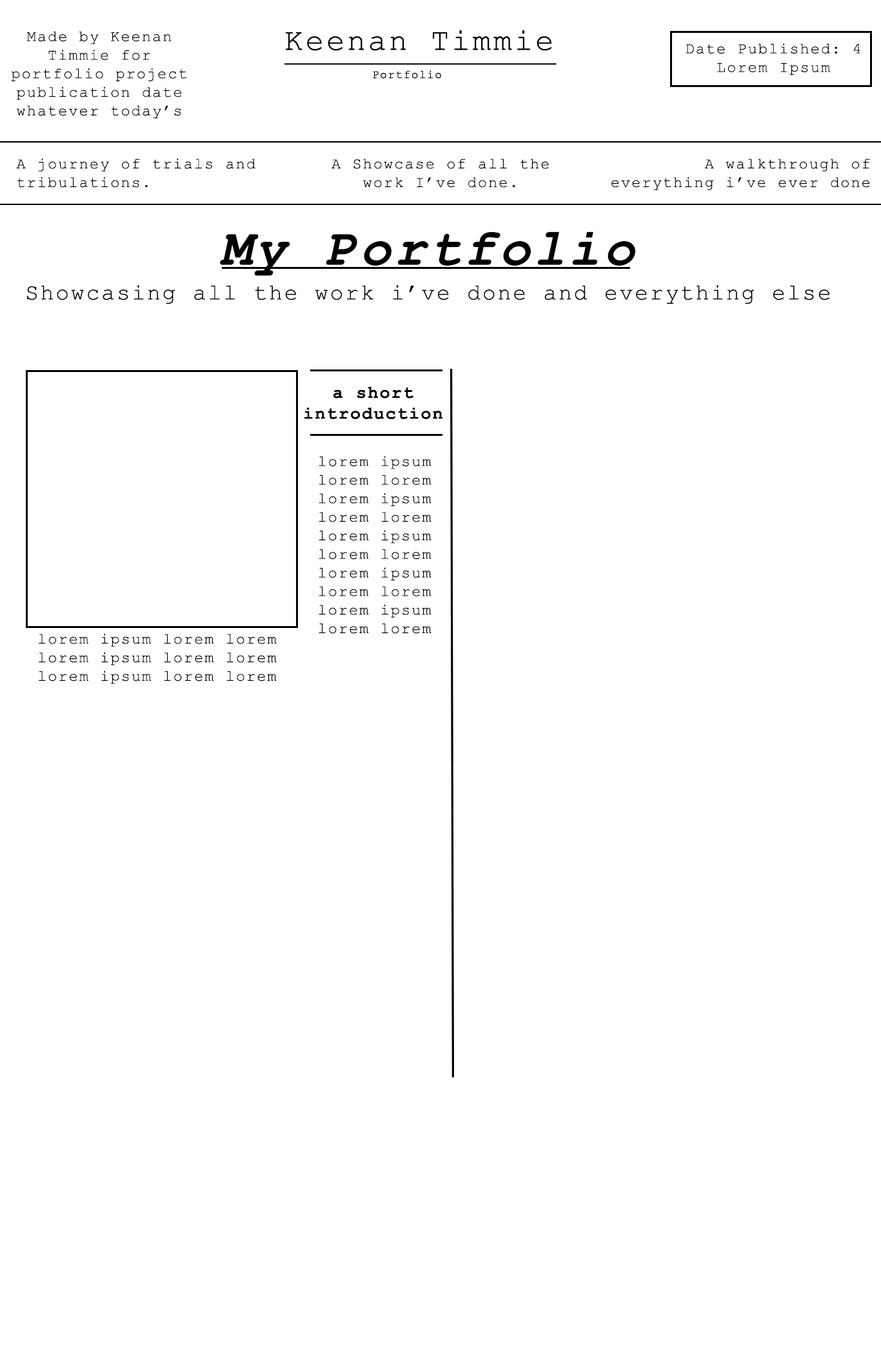
<style>
.page{position:relative;width:881px;height:1354px;background:#ffffff}
.page>*{position:absolute;margin:0}
.t1{font:15.5px "CourierNewPSMT";letter-spacing:0.075em;color:#000000}
.t2{font:51.6px "CourierNewPS-BoldItalicMT";letter-spacing:0.075em;color:#000000}
.t3{font:22.6px "CourierNewPSMT";letter-spacing:0.075em;color:#000000}
.t4{font:17.4px "CourierNewPS-BoldMT";letter-spacing:0.075em;color:#000000}
</style>
<div class="page">
<p class="t1" style="left:11px;top:32px;width:176px;height:87px;text-align:center">Made by Keenan Timmie for portfolio project publication date<br>whatever today’s date is</p>
<p class="t1" style="left:686px;top:43px;width:174px;height:32px;text-align:center">Date Published: 4 Lorem Ipsum</p>
<p class="t1" style="left:16px;top:159px;width:239px;height:29px">A journey of trials and tribulations.</p>
<p class="t1" style="left:331px;top:159px;width:218px;height:29px;text-align:center">A Showcase of all the work I’ve done.</p>
<p class="t1" style="left:611px;top:159px;width:259px;height:31px;text-align:right">A walkthrough of everything i’ve ever done</p>
<p class="t2" style="left:220px;top:231px;width:415px;height:45px">My Portfolio</p>
<p class="t3" style="left:27px;top:285px;width:802px;height:19px">Showcasing all the work i’ve done and everything else</p>
<p class="t4" style="left:304px;top:386px;width:139px;height:33px;text-align:center">a short introduction</p>
<p class="t1" style="left:318px;top:456px;width:113px;height:178px">lorem ipsum lorem lorem  lorem ipsum lorem lorem  lorem ipsum lorem lorem  lorem ipsum lorem lorem  lorem ipsum lorem lorem</p>
<p class="t1" style="left:39px;top:634px;width:238px;height:50px">lorem ipsum lorem lorem lorem ipsum lorem lorem  lorem ipsum lorem lorem</p>
</div>
